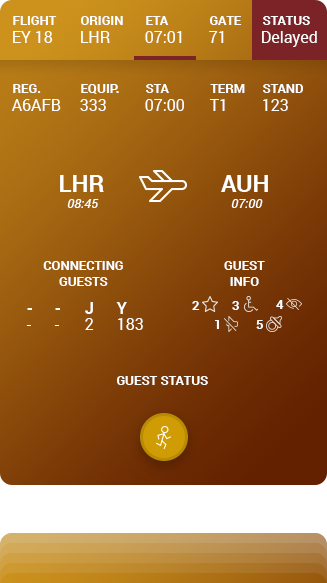
<style>
.page{position:relative;width:327px;height:583px}
.page>*{position:absolute;margin:0}
.t1{font:13px "Roboto-Bold";color:#ffffff;text-transform:uppercase}
.t2{font:16px "Roboto-Regular";color:#ffffff}
.t3{font:24px "Roboto-Bold";color:#ffffff}
.t4{font:13px "Roboto-Italic";color:#ffffff}
.t5{font:16px/16px "Roboto-Bold";color:#ffffff}
.t6{font:16px/16px "Roboto-Regular";color:#ffffff}
</style>
<div class="page">
<p class="t1" style="left:13px;top:16px;width:44px;height:9px">FLIGHT</p>
<p class="t1" style="left:81px;top:16px;width:42px;height:9px">Origin</p>
<p class="t1" style="left:146px;top:16px;width:23px;height:9px">ETA</p>
<p class="t1" style="left:210px;top:16px;width:32px;height:9px">Gate</p>
<p class="t1" style="left:263px;top:16px;width:47px;height:9px">Status</p>
<p class="t2" style="left:13px;top:31px;width:40px;height:12px">EY 18</p>
<p class="t2" style="left:81px;top:31px;width:29px;height:12px">LHR</p>
<p class="t2" style="left:145px;top:31px;width:37px;height:12px">07:01</p>
<p class="t2" style="left:209px;top:31px;width:15px;height:12px">71</p>
<p class="t2" style="left:262px;top:31px;width:55px;height:16px">Delayed</p>
<p class="t1" style="left:13px;top:84px;width:28px;height:9px">Reg.</p>
<p class="t1" style="left:81px;top:84px;width:38px;height:10px">EQuip.</p>
<p class="t1" style="left:146px;top:84px;width:23px;height:9px">STA</p>
<p class="t1" style="left:210px;top:84px;width:35px;height:9px">Term</p>
<p class="t1" style="left:263px;top:84px;width:40px;height:9px">stand</p>
<p class="t2" style="left:11px;top:99px;width:50px;height:12px">A6AFB</p>
<p class="t2" style="left:80px;top:99px;width:26px;height:12px">333</p>
<p class="t2" style="left:145px;top:99px;width:39px;height:12px">07:00</p>
<p class="t2" style="left:209px;top:99px;width:16px;height:12px">T1</p>
<p class="t2" style="left:263px;top:99px;width:25px;height:12px">123</p>
<p class="t3" style="left:60px;top:175px;width:44px;height:17px">LHR</p>
<p class="t3" style="left:221px;top:175px;width:47px;height:17px">AUH</p>
<p class="t4" style="left:67px;top:199px;width:32px;height:9px">08:45</p>
<p class="t4" style="left:231px;top:199px;width:32px;height:9px">07:00</p>
<p class="t1" style="left:43px;top:261px;width:80px;height:25px;text-align:center">Connecting<br>Guests</p>
<p class="t1" style="left:224px;top:261px;width:41px;height:25px;text-align:center">Guest<br>Info</p>
<p class="t5" style="left:85px;top:302px;width:9px;height:28px">J<br><span class="t6">2</span></p>
<p class="t6" style="left:116px;top:302px;width:27px;height:28px"><span class="t5">Y<br></span>183</p>
<p class="t1" style="left:192px;top:301px;width:8px;height:9px">2</p>
<p class="t1" style="left:232px;top:301px;width:7px;height:9px">3</p>
<p class="t1" style="left:276px;top:300px;width:8px;height:9px">4</p>
<p class="t5" style="left:26px;top:308px;width:6px;height:18px">-<br><span class="t6">-</span></p>
<p class="t5" style="left:54px;top:308px;width:6px;height:18px">-<br><span class="t6">-</span></p>
<p class="t1" style="left:215px;top:320px;width:4px;height:9px">1</p>
<p class="t1" style="left:256px;top:320px;width:7px;height:9px">5</p>
<p class="t1" style="left:117px;top:376px;width:91px;height:9px">Guest Status</p>
</div>
